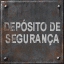
<style>
.page{position:relative;width:64px;height:64px}
.page>*{position:absolute;margin:0}
.t1{font:12px/12px "Arial-BoldMT";color:#b8b8b8;text-transform:uppercase;scale:0.7 1}
</style>
<div class="page">
<p class="t1" style="left:4px;top:19px;width:57px;height:27px;text-align:center">DEPÓSITO dE<br>segurança</p>
</div>
